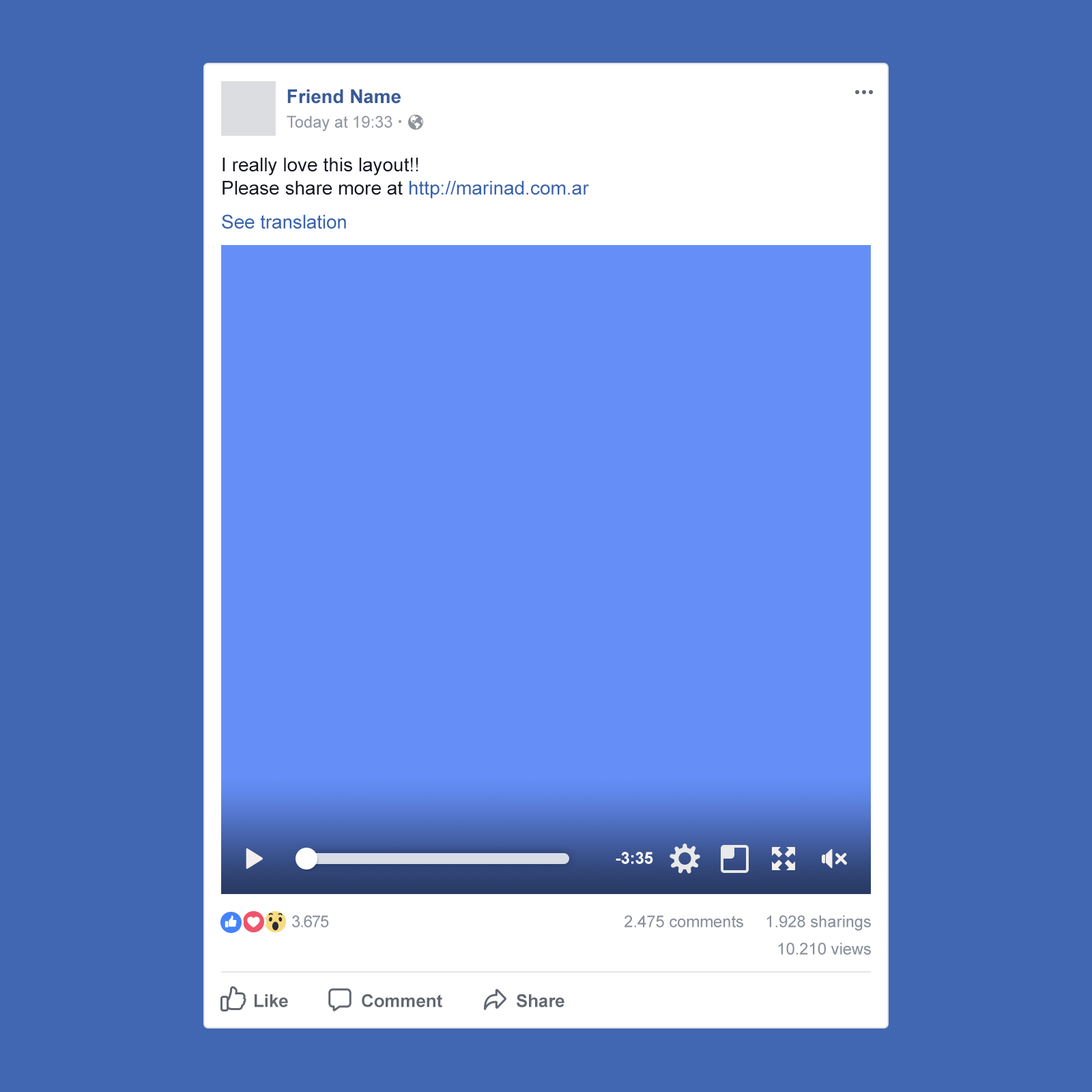
<style>
.page{position:relative;width:1092px;height:1092px;background:#4167b2}
.page>*{position:absolute;margin:0}
.t1{font:19.1px "Arial-BoldMT";letter-spacing:-0.005em;color:#385a97}
.t2{font:16.4px "ArialMT";letter-spacing:-0.005em;color:#9297a2}
.t3{font:19.1px/23.2px "ArialMT";color:#151822}
.t4{font:19.1px/23.2px "ArialMT";color:#3863ad}
.t5{font:19.1px "ArialMT";letter-spacing:-0.005em;color:#3863ad}
.t6{font:16.4px "Arial-BoldMT";letter-spacing:-0.005em;color:#ffffff}
.t7{font:16.4px "ArialMT";letter-spacing:-0.05em;color:#898f9f}
.t8{font:16.4px "ArialMT";letter-spacing:-0.005em;color:#898f9b}
.t9{font:17.7px "Arial-BoldMT";letter-spacing:-0.005em;color:#616770}
</style>
<div class="page">
<p class="t1" style="left:287px;top:89px;width:114px;height:15px">Friend Name</p>
<p class="t2" style="left:287px;top:115px;width:105px;height:16px">Today at 19:33</p>
<p class="t3" style="left:222px;top:158px;width:367px;height:41px">I really love this layout!!<br>Please share more at <span class="t4">http://marinad.com.ar</span></p>
<p class="t5" style="left:222px;top:214px;width:124px;height:15px">See translation</p>
<p class="t6" style="left:616px;top:852px;width:37px;height:12px">-3:35</p>
<p class="t7" style="left:292px;top:915px;width:37px;height:13px">3.675</p>
<p class="t8" style="left:624px;top:915px;width:119px;height:13px">2.475 comments</p>
<p class="t8" style="left:766px;top:915px;width:105px;height:16px">1.928 sharings</p>
<p class="t8" style="left:778px;top:943px;width:93px;height:12px">10.210 views</p>
<p class="t9" style="left:255px;top:994px;width:33px;height:13px">Like</p>
<p class="t9" style="left:362px;top:994px;width:80px;height:13px">Comment</p>
<p class="t9" style="left:517px;top:994px;width:47px;height:13px">Share</p>
</div>
